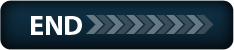
<style>
.page{position:relative;width:234px;height:50px}
.page>*{position:absolute;margin:0}
.t1{font:28px "MyriadPro-Bold";color:#ffffff}
</style>
<div class="page">
<p class="t1" style="left:31px;top:16px;width:51px;height:19px">END</p>
</div>
